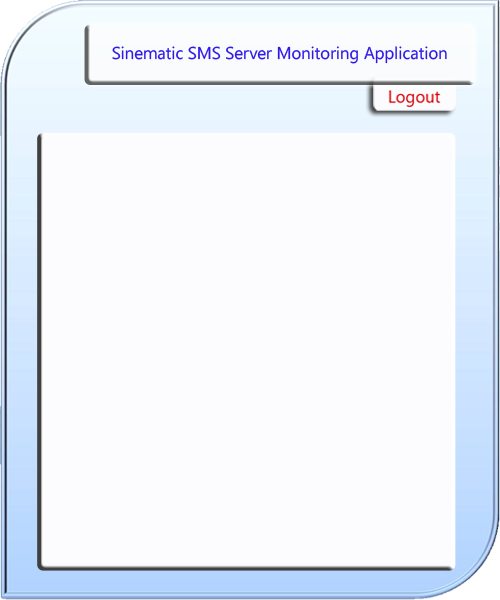
<style>
.page{position:relative;width:500px;height:600px;background:#fcfcfe}
.page>*{position:absolute;margin:0}
.t1{font:17.1px "SegoeUI";color:#321ae6}
</style>
<div class="page">
<p class="t1" style="left:112px;top:46px;width:335px;height:18px">Sinematic SMS Server Monitoring Application</p>
</div>
